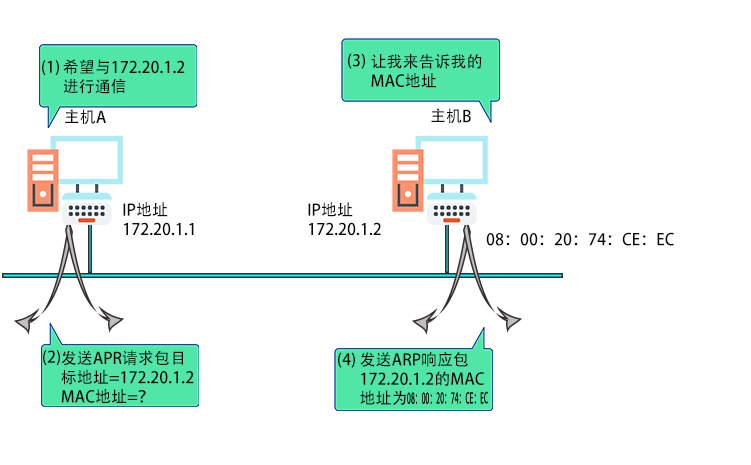
<style>
.page{position:relative;width:751px;height:465px;background:#ffffff}
.page>*{position:absolute;margin:0}
.t1{font:16px "AdobeHeitiStd-Regular";color:#0a0909}
.t2{font:14.7px "AdobeHeitiStd-Regular";color:#0a0909;scale:0.47 1}
</style>
<div class="page">
<p class="t1" style="left:348px;top:53px;width:17px;height:16px">(3)</p>
<p class="t1" style="left:371px;top:54px;width:111px;height:34px">让我来告诉我的<br>MAC地址</p>
<p class="t1" style="left:42px;top:60px;width:17px;height:15px">(1)</p>
<p class="t1" style="left:63px;top:59px;width:122px;height:35px">希望与172.20.1.2<br>进行通信</p>
<p class="t1" style="left:65px;top:109px;width:41px;height:16px">主机A</p>
<p class="t1" style="left:431px;top:108px;width:40px;height:16px">主机B</p>
<p class="t1" style="left:123px;top:202px;width:71px;height:34px">IP地址<br>172.20.1.1</p>
<p class="t1" style="left:308px;top:202px;width:73px;height:34px">IP地址<br>172.20.1.2</p>
<p class="t1" style="left:486px;top:232px;width:188px;height:14px">08：00：20：74：CE：EC</p>
<p class="t1" style="left:43px;top:350px;width:17px;height:15px">(2)</p>
<p class="t1" style="left:61px;top:350px;width:133px;height:54px">发送APR请求包目<br>标地址=172.20.1.2<br>MAC地址=？</p>
<p class="t1" style="left:338px;top:352px;width:17px;height:16px">(4)</p>
<p class="t1" style="left:360px;top:351px;width:124px;height:54px">发送ARP响应包<br>172.20.1.2的MAC<br>地址为</p>
<p class="t2" style="left:407px;top:391px;width:81px;height:13px">08：00：20：74：CE：EC</p>
<p class="t2" style="left:407px;top:391px;width:81px;height:13px">08：00：20：74：CE：EC</p>
</div>
